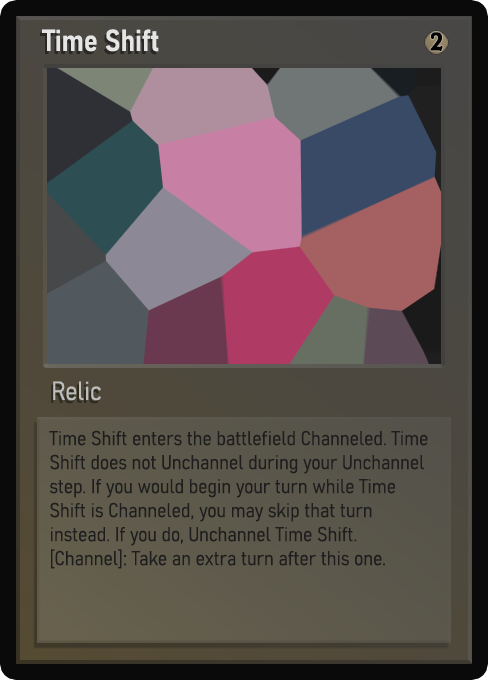
<style>
.page{position:relative;width:488px;height:680px}
.page>*{position:absolute;margin:0}
.t1{font:30px "Bahnschrift-SemiBoldSemiCondensed";color:#f2f2f2;font-weight:bold}
.t2{font:25px "WTRRoycroft";color:#000000;font-weight:bold;scale:1.09 1}
.t3{font:26px "Bahnschrift-LightSemiCondensed";color:#c8c8c8;font-weight:bold}
.t4{font:20px "Bahnschrift-LightSemiCondensed";color:#1e1e1e;font-weight:bold}
</style>
<div class="page">
<p class="t1" style="left:42px;top:29px;width:117px;height:23px;opacity:0.9">Time Shift</p>
<p class="t2" style="left:430px;top:32px;width:13px;height:19px">2</p>
<p class="t3" style="left:53px;top:381px;width:48px;height:20px;opacity:0.9">Relic</p>
<p class="t4" style="left:49px;top:430px;width:379px;height:139px">Time Shift enters the battlefield Channeled. Time Shift does not Unchannel during your Unchannel step. If you would begin your turn while Time Shift is Channeled, you may skip that turn instead. If you do, Unchannel Time Shift. [Channel]: Take an extra turn after this one.</p>
</div>
